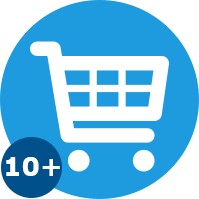
<style>
.page{position:relative;width:199px;height:199px;background:#1e9bde}
.page>*{position:absolute;margin:0}
.t1{font:25.8px "Verdana-Bold";color:#ffffff}
</style>
<div class="page">
<p class="t1" style="left:6px;top:157px;width:54px;height:19px">10+</p>
</div>
